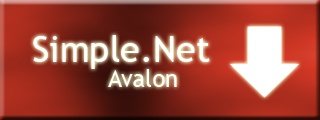
<style>
.page{position:relative;width:320px;height:120px}
.page>*{position:absolute;margin:0}
.t1{font:36px "TrebuchetMS";color:#ffffff}
.t2{font:24px "TrebuchetMS";color:#ffffff}
</style>
<div class="page">
<p class="t1" style="left:33px;top:35px;width:177px;height:34px">Simple.Net</p>
<p class="t2" style="left:108px;top:69px;width:69px;height:18px">Avalon</p>
</div>
